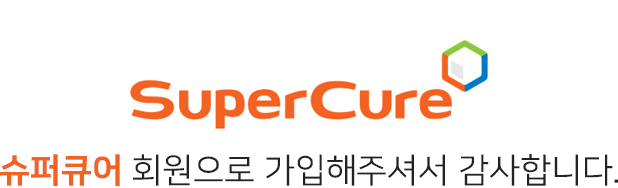
<style>
.page{position:relative;width:618px;height:188px;background:#ffffff}
.page>*{position:absolute;margin:0}
.t1{font:34px "NanumSquareR";color:#222222}
.t2{font:34px "NanumSquareEB";color:#f26222}
</style>
<div class="page">
<p class="t1" style="left:0px;top:154px;width:618px;height:32px"><span class="t2">슈퍼큐어 </span>회원으로 가입해주셔서 감사합니다.</p>
</div>
